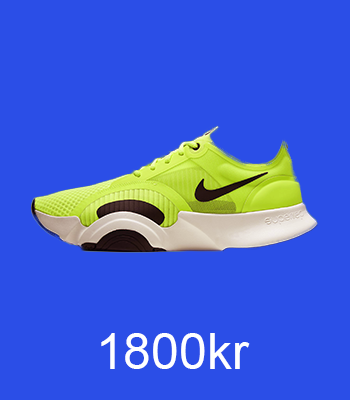
<style>
.page{position:relative;width:350px;height:400px;background:#2b4ee7}
.page>*{position:absolute;margin:0}
.t1{font:50px "ArialMT";color:#feffff}
</style>
<div class="page">
<p class="t1" style="left:101px;top:333px;width:149px;height:36px">1800kr</p>
</div>
